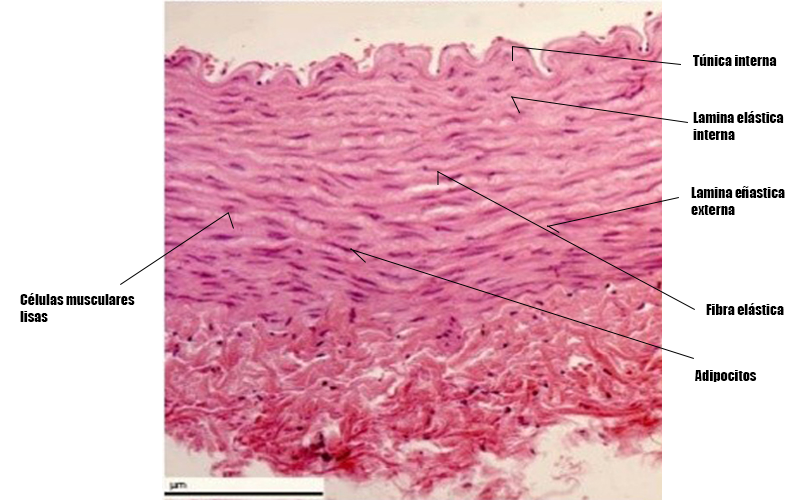
<style>
.page{position:relative;width:810px;height:500px;background:#ffffff}
.page>*{position:absolute;margin:0}
.t1{font:14px "Impact";color:#000000}
</style>
<div class="page">
<p class="t1" style="left:693px;top:54px;width:84px;height:12px">Túnica interna</p>
<p class="t1" style="left:693px;top:111px;width:91px;height:29px">Lamina elástica interna</p>
<p class="t1" style="left:691px;top:186px;width:94px;height:29px">Lamina eñastica externa</p>
<p class="t1" style="left:20px;top:293px;width:115px;height:29px">Células musculares lisas</p>
<p class="t1" style="left:706px;top:303px;width:78px;height:12px">Fibra elástica</p>
<p class="t1" style="left:695px;top:370px;width:62px;height:12px">Adipocitos</p>
</div>
